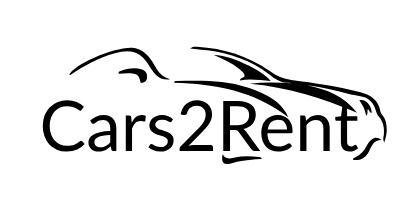
<style>
.page{position:relative;width:400px;height:200px;background:#ffffff}
.page>*{position:absolute;margin:0}
.t1{font:69.9px "Lato-Regular";color:#000000}
.t2{font:69.9px "Lato-Regular";color:#ffffff}
</style>
<div class="page">
<p class="t1" style="left:42px;top:100px;width:316px;height:52px"><span class="t2">C</span>ars2Rent</p>
</div>
